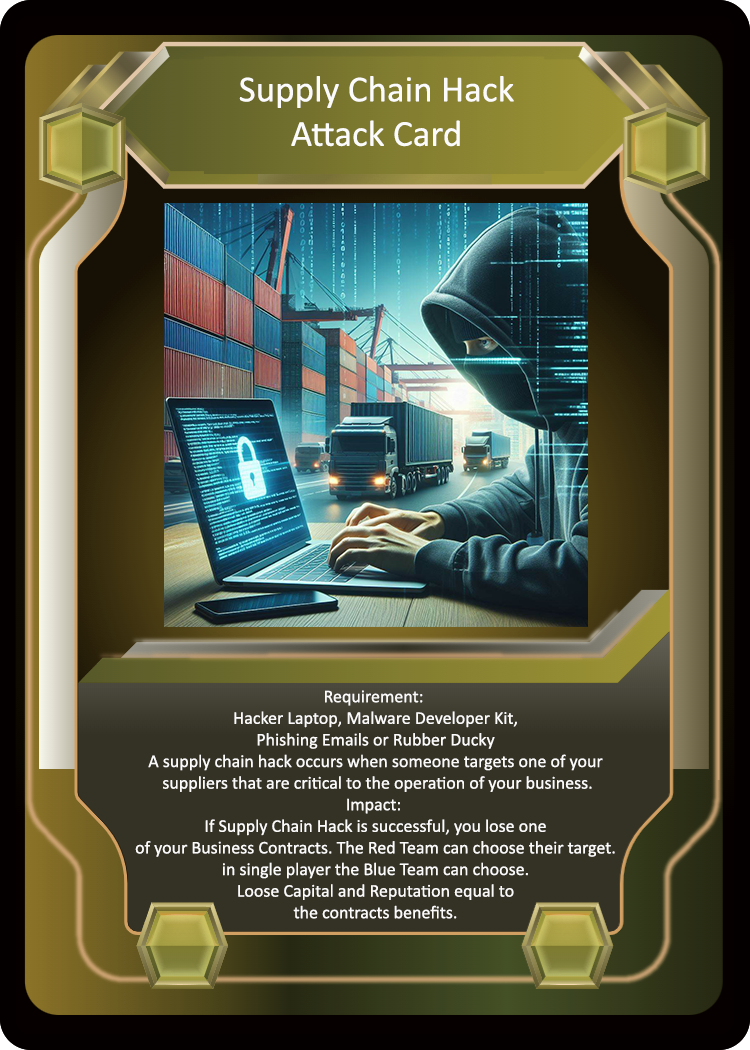
<style>
.page{position:relative;width:750px;height:1050px}
.page>*{position:absolute;margin:0}
.t1{font:37px "Calibri";color:#fcfbfb}
.t2{font:18px "Calibri";color:#fcfbfb}
</style>
<div class="page">
<p class="t1" style="left:239px;top:76px;width:275px;height:71px;text-align:center">Supply Chain Hack<br>Attack Card</p>
<p class="t2" style="left:135px;top:690px;width:480px;height:229px;text-align:center">Requirement: <br>Hacker Laptop, Malware Developer Kit,<br>Phishing Emails or Rubber Ducky<br>A supply chain hack occurs when someone targets one of your<br> suppliers that are critical to the operation of your business.<br>Impact: <br>If Supply Chain Hack is successful, you lose one<br>of your Business Contracts. The Red Team can choose their target.<br>in single player the Blue Team can choose.<br>Loose Capital and Reputation equal to<br>the contracts benefits.</p>
</div>
